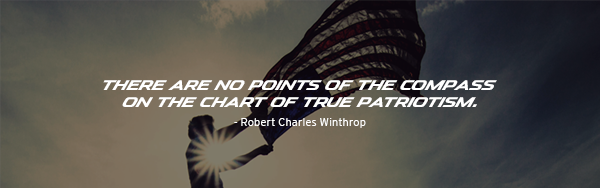
<style>
.page{position:relative;width:600px;height:188px}
.page>*{position:absolute;margin:0}
.t1{font:14.1px "Mazda-Bold";color:#ffffff}
.t2{font:11.3px "InterstateMazda-Light";color:#ffffff}
</style>
<div class="page">
<p class="t1" style="left:103px;top:80px;width:394px;height:27px;text-align:center">There are no points of the compass <br>on the chart of true patriotism.</p>
<p class="t2" style="left:234px;top:118px;width:132px;height:10px">- Robert Charles Winthrop</p>
</div>
